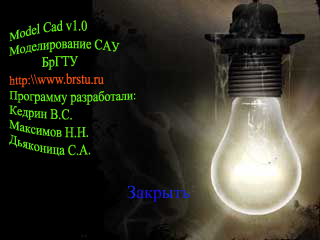
<style>
.page{position:relative;width:320px;height:240px;background:#000000}
.page>*{position:absolute;margin:0}
.t1{font:12px "TimesNewRomanPSMT";color:#5eee0f}
.t2{font:12px "TimesNewRomanPSMT";color:#ee4e0f}
.t3{font:18px "TimesNewRomanPSMT";color:#190fee}
.t4{font:18px "TimesNewRomanPSMT";color:#0f24ee}
</style>
<div class="page">
<p class="t1" style="left:9px;top:20px;width:127px;height:137px">Model Cad v1.0<br>Моделирование САУ<br>           БрГТУ<br><span class="t2">http:\\www.brstu.ru<br></span>Программу разработали:<br>Кедрин В.С.<br>Максимов Н.Н.<br>Дьяконица С.А.</p>
<p class="t3" style="left:127px;top:185px;width:63px;height:17px"><span class="t4">              З</span>акр<span class="t4">ыть</span></p>
</div>
